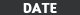
<style>
.page{position:relative;width:80px;height:15px;background:#333436}
.page>*{position:absolute;margin:0}
.t1{font:11px "HeadlineR-HM";letter-spacing:-0.02em;color:#ffffff}
</style>
<div class="page">
<p class="t1" style="left:23px;top:3px;width:34px;height:10px">DATE</p>
</div>
